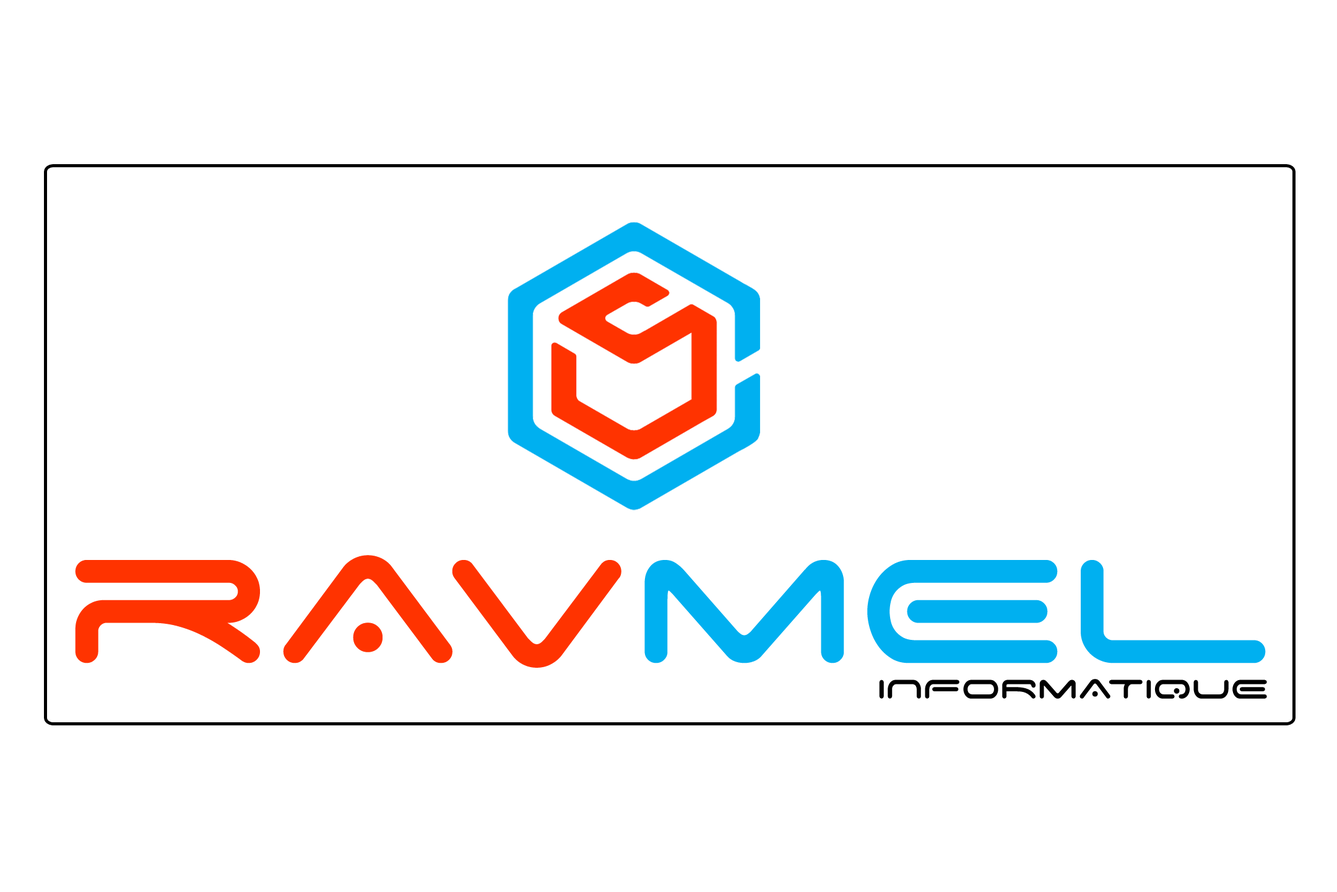
<style>
.page{position:relative;width:1337px;height:892px;background:#ffffff}
.page>*{position:absolute;margin:0}
.t1{font:235.9px "SpaceAge";color:#ff3300}
.t2{font:235.9px "SpaceAge";color:#00b0f0}
.t3{font:42.5px "SpaceAge";color:#000000}
</style>
<div class="page">
<p class="t1" style="left:75px;top:555px;width:1191px;height:112px">rAV<span class="t2">mEL</span></p>
<p class="t3" style="left:879px;top:679px;width:388px;height:19px">INFORmATIQUE</p>
</div>
